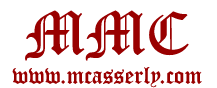
<style>
.page{position:relative;width:217px;height:88px;background:#ffffff}
.page>*{position:absolute;margin:0}
.t1{font:24px "OldEnglishTextMT";color:#990000}
.t2{font:60px "OldEnglishTextMT";color:#990000}
</style>
<div class="page">
<p class="t1" style="left:12px;top:10px;width:190px;height:78px;text-align:center"><span class="t2">MMC<br></span>www.mcasserly.com</p>
</div>
